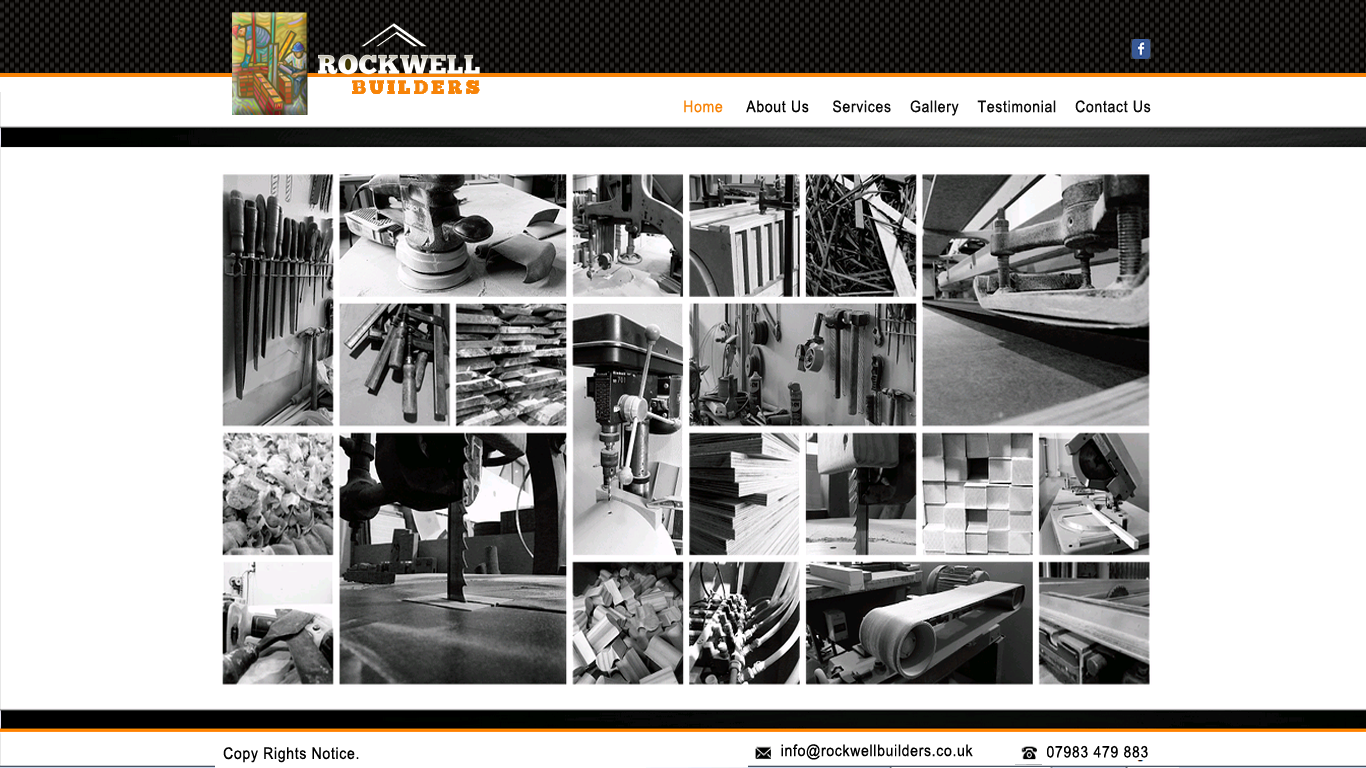
<style>
.page{position:relative;width:1366px;height:768px;background:#ffffff}
.page>*{position:absolute;margin:0}
.t1{font:27.4px "ArialMT";letter-spacing:0.05em;color:#0a0a0a;scale:0.88 1}
.t2{font:27.4px "ArialMT";letter-spacing:0.05em;color:#f78307;scale:0.88 1}
.t3{font:27.4px "ArialMT";letter-spacing:0.05em;color:#000000;scale:0.88 1}
</style>
<div class="page">
<p class="t1" style="left:684px;top:100px;width:467px;height:16px"><span class="t2">Home     </span><span class="t3">About Us     </span>Services    Gallery    Testimonial    Contact Us</p>
<p class="t3" style="left:223px;top:747px;width:136px;height:16px">Copy Rights Notice.</p>
</div>
